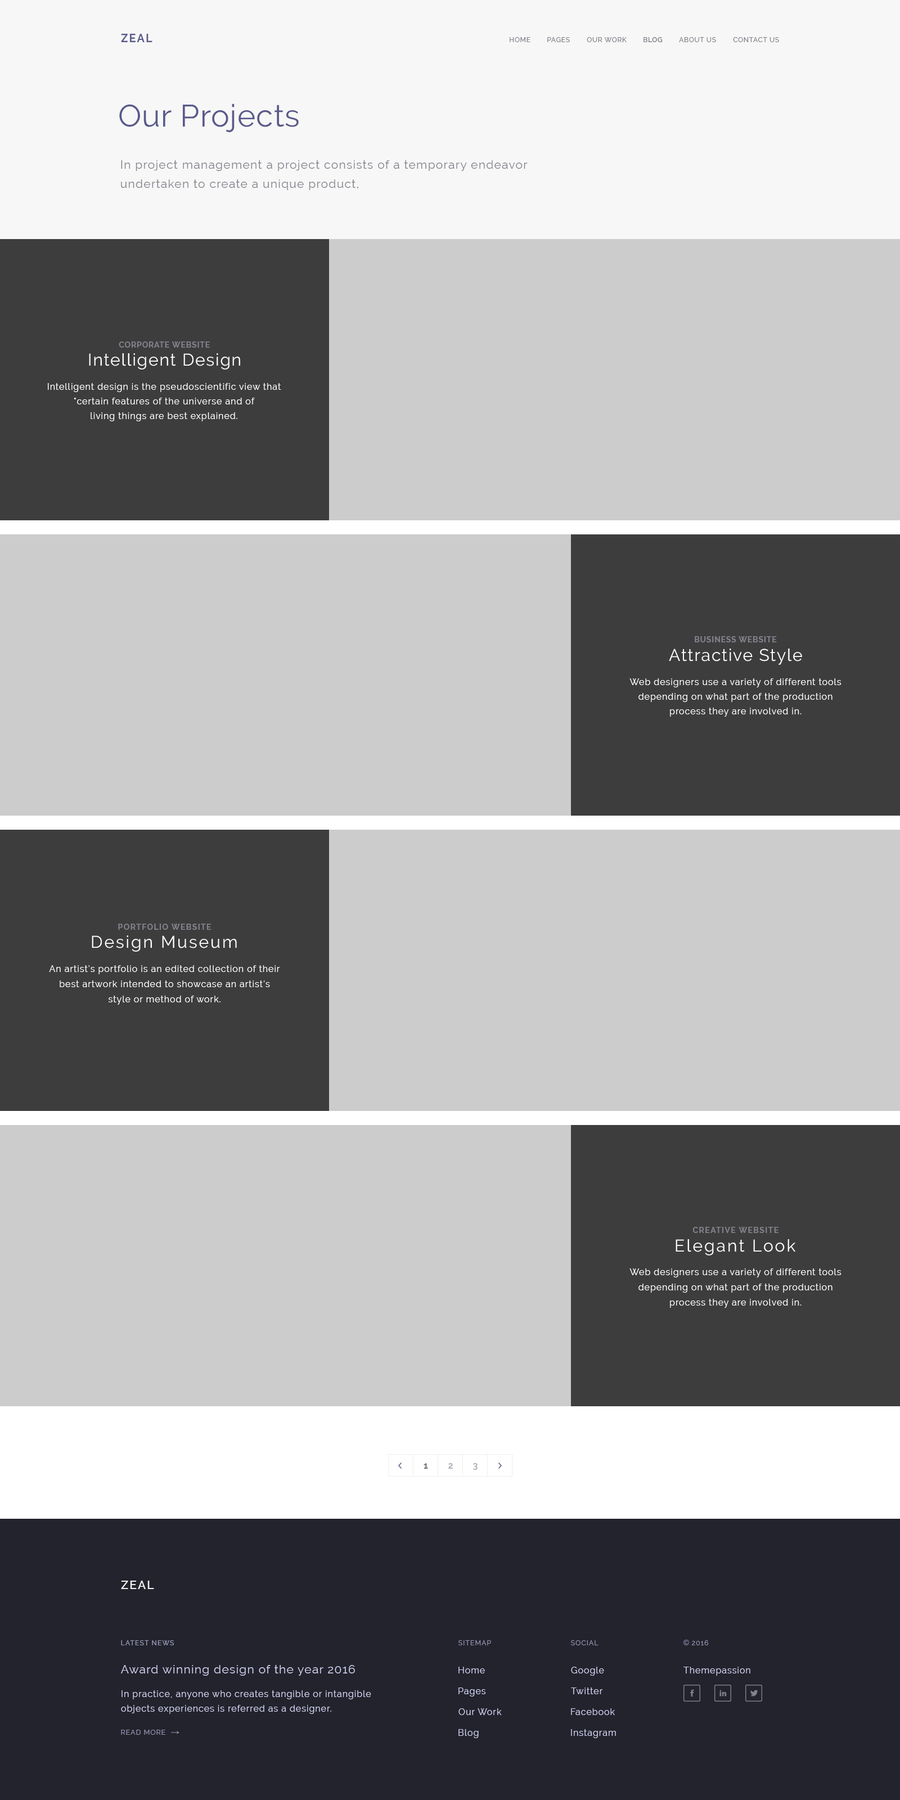
<style>
.page{position:relative;width:900px;height:1800px;background:#cccccc}
.page>*{position:absolute;margin:0}
.t1{font:11.2px "Raleway-Bold";letter-spacing:0.1em;color:#5a5a8c}
.t2{font:6.8px "Raleway-Medium";letter-spacing:0.06em;color:#82828c}
.t3{font:6.8px "Raleway-SemiBold";letter-spacing:0.06em;color:#82828c}
.t4{font:30.9px "Raleway-Regular";letter-spacing:0.02em;color:#5a5a8c}
.t5{font:11.8px/19.1px "Raleway-Regular";letter-spacing:0.06em;color:#82828c}
.t6{font:7.9px "Raleway-Bold";letter-spacing:0.06em;color:#82828c}
.t7{font:16.9px "Raleway-Regular";letter-spacing:0.06em;color:#ffffff}
.t8{font:9px/14.6px "Raleway-Regular";letter-spacing:0.06em;color:#ffffff}
.t9{font:7.9px "Raleway-Bold";letter-spacing:0.1em;color:#82828c}
.t10{font:16.9px "Raleway-Regular";letter-spacing:0.1em;color:#ffffff}
.t11{font:9px/15.2px "Raleway-Regular";letter-spacing:0.06em;color:#ffffff}
.t12{font:9px "Raleway-Bold";color:#757575}
.t13{font:9px "Raleway-Bold";color:#b3b3bc}
.t14{font:11.8px "Raleway-SemiBold";letter-spacing:0.1em;color:#eeeeee}
.t15{font:6.8px "Raleway-Medium";letter-spacing:0.1em;color:#9797b8}
.t16{font:6.8px "Raleway-Regular";letter-spacing:0.1em;color:#9797b8}
.t17{font:11.8px "Raleway-Regular";letter-spacing:0.06em;color:#d0d0f0}
.t18{font:9px "Raleway-Regular";letter-spacing:0.06em;color:#d0d0f0}
.t19{font:9px/14.6px "Raleway-Regular";letter-spacing:0.06em;color:#d0d0f0}
</style>
<div class="page">
<p class="t1" style="left:121px;top:34px;width:31px;height:8px">ZEAL</p>
<p class="t2" style="left:510px;top:37px;width:20px;height:5px">HOME</p>
<p class="t2" style="left:547px;top:37px;width:23px;height:5px">PAGES</p>
<p class="t2" style="left:587px;top:37px;width:40px;height:5px">OUR WORK</p>
<p class="t3" style="left:644px;top:37px;width:19px;height:5px">BLOG</p>
<p class="t2" style="left:679px;top:37px;width:37px;height:5px">ABOUT US</p>
<p class="t2" style="left:733px;top:37px;width:46px;height:5px">CONTACT US</p>
<p class="t4" style="left:119px;top:104px;width:180px;height:28px">Our Projects</p>
<p class="t5" style="left:121px;top:160px;width:407px;height:30px;text-align:right">In project management a project consists of a temporary endeavor<br>undertaken to create a unique product,</p>
<p class="t6" style="left:119px;top:341px;width:91px;height:7px">CORPORATE WEBSITE</p>
<p class="t7" style="left:89px;top:353px;width:151px;height:17px">Intelligent Design</p>
<p class="t8" style="left:48px;top:383px;width:233px;height:38px;text-align:center">Intelligent design is the pseudoscientific view that<br>"certain features of the universe and of<br>living things are best explained.</p>
<p class="t6" style="left:695px;top:636px;width:82px;height:6px">BUSINESS WEBSITE</p>
<p class="t7" style="left:669px;top:649px;width:133px;height:16px">Attractive Style</p>
<p class="t8" style="left:629px;top:678px;width:213px;height:39px;text-align:center">Web designers use a variety of different tools<br>depending on what part of the production<br>process they are involved in.</p>
<p class="t9" style="left:118px;top:924px;width:94px;height:6px">PORTFOLIO WEBSITE</p>
<p class="t10" style="left:92px;top:935px;width:145px;height:17px">Design Museum</p>
<p class="t11" style="left:49px;top:965px;width:231px;height:40px;text-align:center">An artist's portfolio is an edited collection of their<br>best artwork intended to showcase an artist's<br>style or method of work.</p>
<p class="t9" style="left:692px;top:1227px;width:86px;height:6px">CREATIVE WEBSITE</p>
<p class="t10" style="left:676px;top:1239px;width:120px;height:17px">Elegant Look</p>
<p class="t11" style="left:629px;top:1268px;width:213px;height:40px;text-align:center">Web designers use a variety of different tools<br>depending on what part of the production<br>process they are involved in.</p>
<p class="t12" style="left:424px;top:1463px;width:4px;height:6px">1</p>
<p class="t13" style="left:448px;top:1463px;width:5px;height:6px">2</p>
<p class="t13" style="left:473px;top:1463px;width:5px;height:7px">3</p>
<p class="t14" style="left:121px;top:1581px;width:33px;height:8px">ZEAL</p>
<p class="t15" style="left:121px;top:1640px;width:53px;height:5px">LATEST NEWS</p>
<p class="t16" style="left:458px;top:1640px;width:33px;height:5px">SITEMAP</p>
<p class="t16" style="left:571px;top:1640px;width:27px;height:5px">SOCIAL</p>
<p class="t16" style="left:692px;top:1640px;width:17px;height:5px">2016</p>
<p class="t17" style="left:121px;top:1665px;width:234px;height:11px">Award winning design of the year 2016</p>
<p class="t18" style="left:458px;top:1667px;width:27px;height:6px">Home</p>
<p class="t18" style="left:571px;top:1667px;width:33px;height:9px">Google</p>
<p class="t18" style="left:683px;top:1667px;width:67px;height:9px">Themepassion</p>
<p class="t19" style="left:121px;top:1690px;width:250px;height:24px;text-align:right">In practice, anyone who creates tangible or intangible<br>objects experiences is referred as a designer.</p>
<p class="t18" style="left:458px;top:1688px;width:28px;height:8px">Pages</p>
<p class="t18" style="left:571px;top:1688px;width:32px;height:6px">Twitter</p>
<p class="t18" style="left:458px;top:1708px;width:44px;height:7px">Our Work</p>
<p class="t18" style="left:571px;top:1708px;width:44px;height:7px">Facebook</p>
<p class="t16" style="left:121px;top:1730px;width:44px;height:5px">READ MORE</p>
<p class="t18" style="left:458px;top:1729px;width:21px;height:9px">Blog</p>
<p class="t18" style="left:571px;top:1729px;width:45px;height:9px">Instagram</p>
</div>
